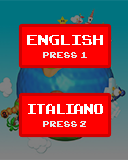
<style>
.page{position:relative;width:128px;height:160px;background:#ff0000}
.page>*{position:absolute;margin:0}
.t1{font:20px "ArcadeClassic";color:#ffffff}
.t2{font:12.4px "ArcadeClassic";color:#e6e6e6;scale:0.97 1}
.t3{font:19px "ArcadeClassic";color:#ffffff}
</style>
<div class="page">
<p class="t1" style="left:27px;top:35px;width:76px;height:10px">english</p>
<p class="t2" style="left:43px;top:52px;width:44px;height:6px">press 1</p>
<p class="t3" style="left:28px;top:104px;width:75px;height:10px">italiano</p>
<p class="t2" style="left:43px;top:121px;width:43px;height:6px">press 2</p>
</div>
